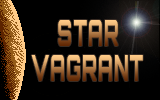
<style>
.page{position:relative;width:160px;height:100px;background:#000000}
.page>*{position:absolute;margin:0}
.t1{font:36px "Orbitron-Black";letter-spacing:0.05em;scale:0.5 1}
</style>
<div class="page">
<p class="t1" style="left:58px;top:20px;width:60px;height:26px">STAR</p>
<p class="t1" style="left:31px;top:55px;width:112px;height:26px">VAGRANT</p>
</div>
